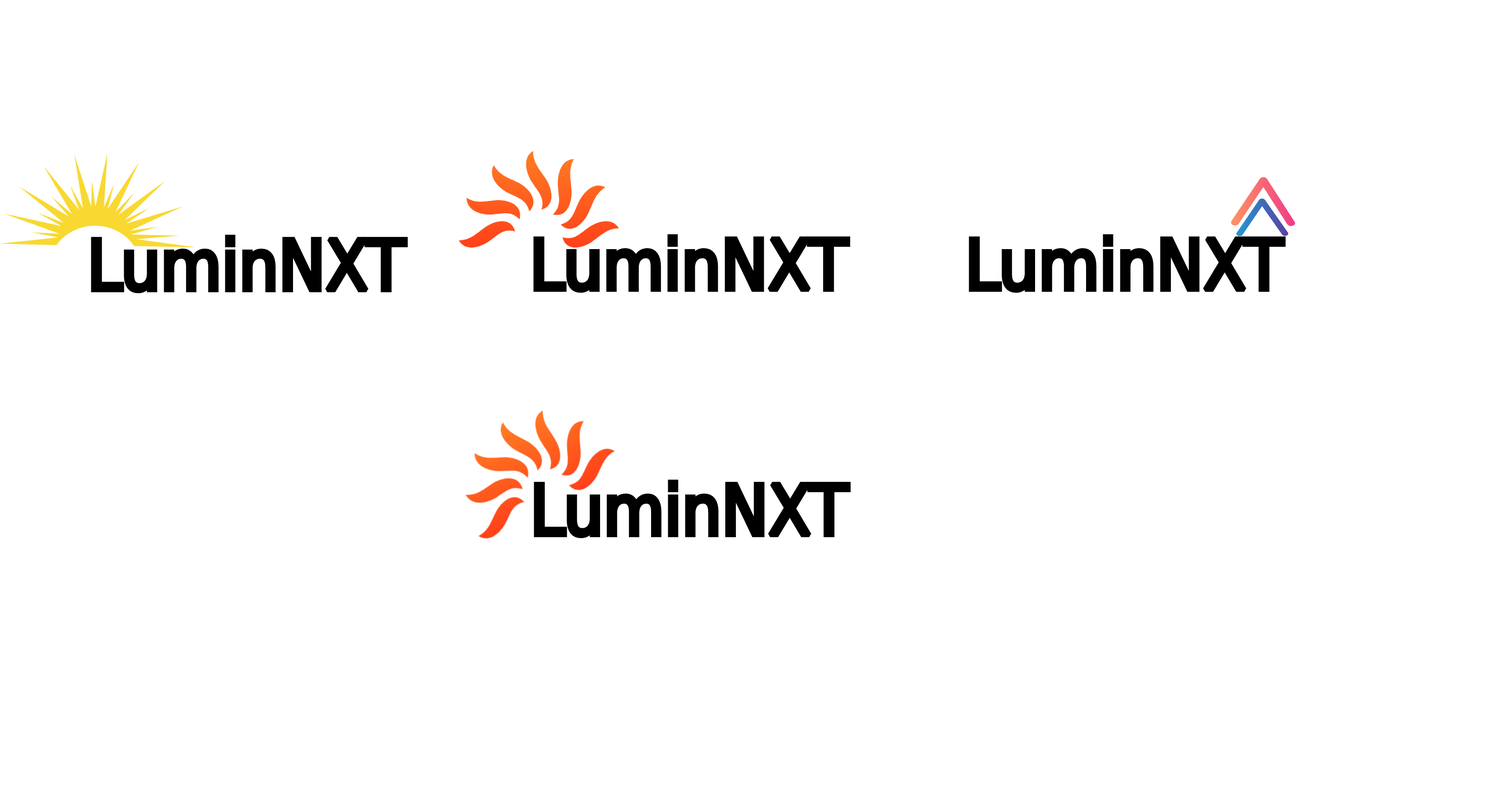
<style>
.page{position:relative;width:1509px;height:790px;background:#ffffff}
.page>*{position:absolute;margin:0}
.t1{font:69.6px "DejaVuSansCondensed";color:#000000}
</style>
<div class="page">
<p class="t1" style="left:91px;top:235px;width:317px;height:59px">LuminNXT</p>
<p class="t1" style="left:533px;top:234px;width:318px;height:59px">LuminNXT</p>
<p class="t1" style="left:969px;top:234px;width:317px;height:59px">LuminNXT</p>
<p class="t1" style="left:534px;top:480px;width:317px;height:59px">LuminNXT</p>
</div>
